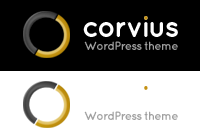
<style>
.page{position:relative;width:200px;height:140px;background:#ffffff}
.page>*{position:absolute;margin:0}
.t1{font:12px "QuicksandBold-Regular";letter-spacing:-0.075em;color:#a0a0a0}
</style>
<div class="page">
<p class="t1" style="left:84px;top:41px;width:94px;height:9px">WordPress theme</p>
<p class="t1" style="left:84px;top:111px;width:94px;height:9px">WordPress theme</p>
</div>
